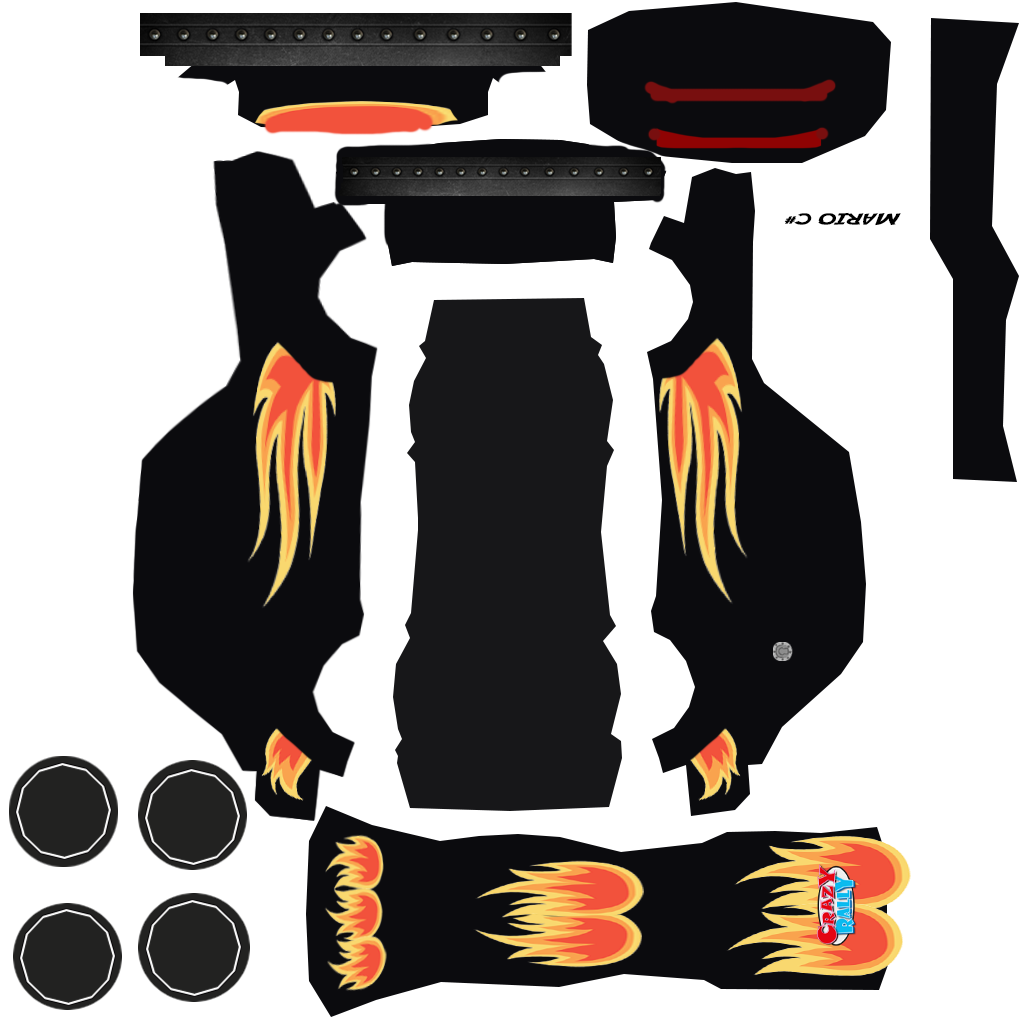
<style>
.page{position:relative;width:1024px;height:1024px;background:#ffffff}
.page>*{position:absolute;margin:0}
.t1{font:15.5px "Adventure";letter-spacing:-0.02em;color:#000000;scale:1.61 1}
</style>
<div class="page">
<p class="t1" style="left:784px;top:212px;width:117px;height:14px;rotate:180deg">MARIO C#</p>
</div>
